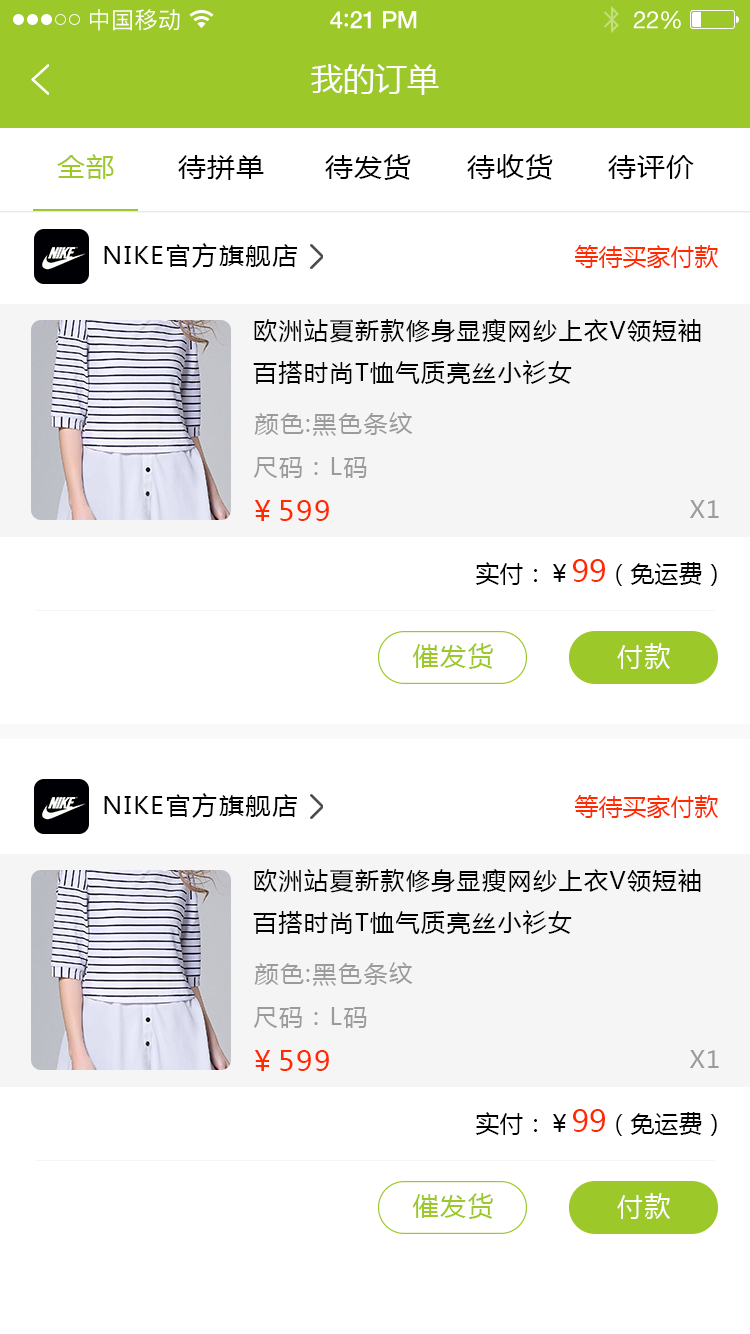
<style>
.page{position:relative;width:750px;height:1334px;background:#ffffff}
.page>*{position:absolute;margin:0}
.t1{font:23px "PingFangSC-Regular";letter-spacing:0.02em;color:#ffffff}
.t2{font:24px "HelveticaNeue-Medium";letter-spacing:-0.02em;color:#ffffff}
.t3{font:26px "Avenir-Medium";letter-spacing:-0.02em;color:#ffffff}
.t4{font:24px "HelveticaNeue";letter-spacing:-0.02em;color:#ffffff}
.t5{font:32px "MicrosoftYaHei";color:#ffffff;text-transform:uppercase}
.t6{font:26px "MicrosoftYaHei";letter-spacing:0.05em;color:#9cc829;scale:1.06 1}
.t7{font:26px "MicrosoftYaHei";letter-spacing:0.05em;color:#000000;scale:1.06 1}
.t8{font:24px "MicrosoftYaHei";letter-spacing:0.05em;color:#000000;scale:1.06 1}
.t9{font:24px "MicrosoftYaHei";color:#ff2a00;text-transform:uppercase}
.t10{font:24px "MicrosoftYaHei";letter-spacing:0.06em;color:#000000;text-transform:uppercase}
.t11{font:24px "MicrosoftYaHei";letter-spacing:0.06em;color:#9b9b9b;text-transform:uppercase}
.t12{font:28px "MicrosoftYaHei";letter-spacing:0.06em;color:#ff2a00;text-transform:uppercase}
.t13{font:24px "MicrosoftYaHei";color:#000000;text-transform:uppercase}
.t14{font:30px "MicrosoftYaHei";color:#ff2a00;text-transform:uppercase}
.t15{font:26.1px "MicrosoftYaHei";letter-spacing:0.05em;color:#9cc829;text-transform:uppercase}
.t16{font:26.1px "MicrosoftYaHei";letter-spacing:0.05em;color:#ffffff;text-transform:uppercase}
</style>
<div class="page">
<p class="t1" style="left:90px;top:9px;width:90px;height:22px">中国移动</p>
<p class="t2" style="left:330px;top:11px;width:87px;height:18px">4<span class="t3">:</span>21 PM</p>
<p class="t4" style="left:633px;top:11px;width:48px;height:18px">22%</p>
<p class="t5" style="left:311px;top:64px;width:128px;height:31px">我的订单</p>
<p class="t6" style="left:57px;top:154px;width:57px;height:25px">全部</p>
<p class="t7" style="left:178px;top:155px;width:86px;height:25px">待拼单</p>
<p class="t7" style="left:325px;top:154px;width:86px;height:26px">待发货</p>
<p class="t7" style="left:467px;top:154px;width:86px;height:26px">待收货</p>
<p class="t7" style="left:608px;top:155px;width:86px;height:24px">待评价</p>
<p class="t8" style="left:104px;top:243px;width:193px;height:25px">NIKE官方旗舰店</p>
<p class="t9" style="left:574px;top:245px;width:144px;height:23px">等待买家付款</p>
<p class="t10" style="left:253px;top:319px;width:448px;height:65px">欧洲站夏新款修身显瘦网纱上衣v领短袖百搭时尚t恤气质亮丝小衫女</p>
<p class="t11" style="left:254px;top:412px;width:159px;height:24px">颜色:黑色条纹</p>
<p class="t11" style="left:253px;top:457px;width:114px;height:21px">尺码：L码</p>
<p class="t12" style="left:254px;top:500px;width:75px;height:21px">￥599</p>
<p class="t11" style="left:689px;top:500px;width:30px;height:18px">x1</p>
<p class="t13" style="left:476px;top:559px;width:241px;height:27px">实付：￥<span class="t14">99</span>（免运费）</p>
<p class="t15" style="left:412px;top:643px;width:81px;height:26px">催发货</p>
<p class="t16" style="left:617px;top:643px;width:53px;height:26px">付款</p>
<p class="t8" style="left:104px;top:793px;width:193px;height:25px">NIKE官方旗舰店</p>
<p class="t9" style="left:574px;top:795px;width:144px;height:23px">等待买家付款</p>
<p class="t10" style="left:253px;top:869px;width:448px;height:65px">欧洲站夏新款修身显瘦网纱上衣v领短袖百搭时尚t恤气质亮丝小衫女</p>
<p class="t11" style="left:254px;top:962px;width:159px;height:24px">颜色:黑色条纹</p>
<p class="t11" style="left:253px;top:1007px;width:114px;height:21px">尺码：L码</p>
<p class="t12" style="left:254px;top:1050px;width:75px;height:21px">￥599</p>
<p class="t11" style="left:689px;top:1050px;width:30px;height:18px">x1</p>
<p class="t13" style="left:476px;top:1109px;width:241px;height:27px">实付：￥<span class="t14">99</span>（免运费）</p>
<p class="t15" style="left:412px;top:1193px;width:81px;height:26px">催发货</p>
<p class="t16" style="left:617px;top:1193px;width:53px;height:26px">付款</p>
</div>
